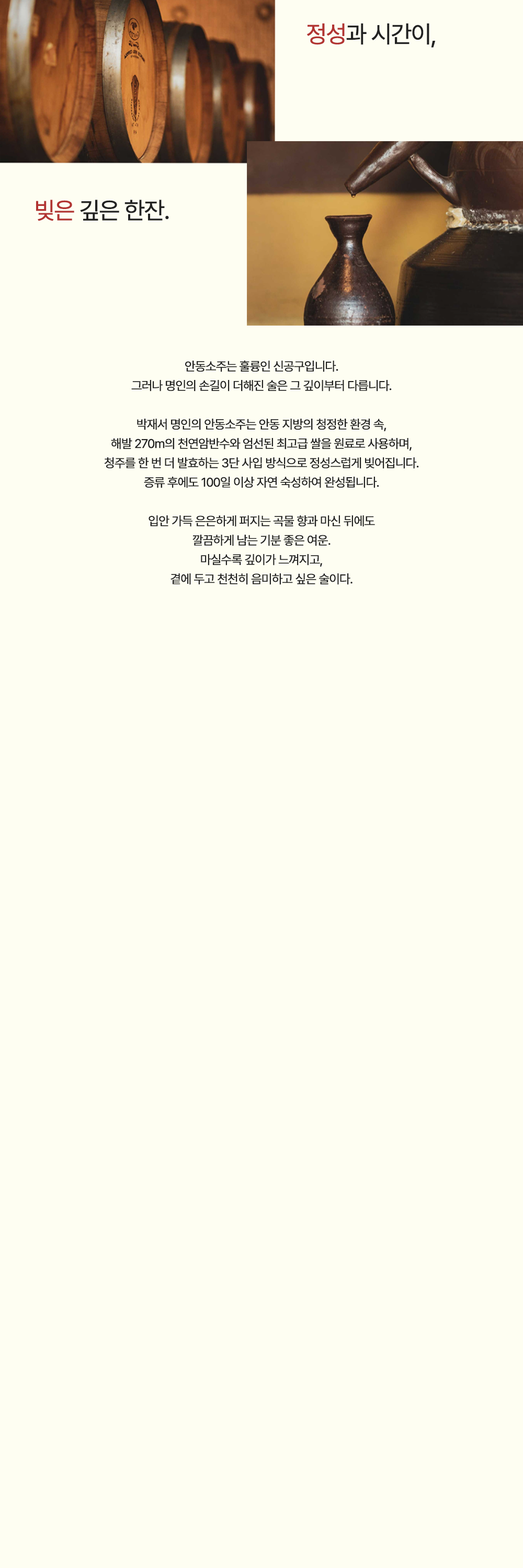
<style>
.page{position:relative;width:523px;height:1568px;background:#fefef2}
.page>*{position:absolute;margin:0}
.t1{font:24px "Pretendard-Regular";letter-spacing:-0.05em;color:#222222;font-weight:bold}
.t2{font:24px "Pretendard-Regular";letter-spacing:-0.05em;color:#b23432;font-weight:bold}
.t3{font:12.5px/19.3px "Pretendard-Regular";letter-spacing:-0.05em;color:#222222;font-weight:bold}
</style>
<div class="page">
<p class="t1" style="left:307px;top:23px;width:128px;height:25px"><span class="t2">정성</span>과 시간이,</p>
<p class="t1" style="left:36px;top:200px;width:133px;height:21px"><span class="t2">빚은</span> 깊은 한잔.</p>
<p class="t3" style="left:104px;top:360px;width:315px;height:225px;text-align:center">안동소주는 훌륭인 신공구입니다.<br>그러나 명인의 손길이 더해진 술은 그 깊이부터 다릅니다.<br><br>박재서 명인의 안동소주는 안동 지방의 청정한 환경 속,<br>해발 270m의 천연암반수와 엄선된 최고급 쌀을 원료로 사용하며,<br>청주를 한 번 더 발효하는 3단 사입 방식으로 정성스럽게 빚어집니다.<br>증류 후에도 100일 이상 자연 숙성하여 완성됩니다.<br><br>입안 가득 은은하게 퍼지는 곡물 향과 마신 뒤에도<br>깔끔하게 남는 기분 좋은 여운.<br>마실수록 깊이가 느껴지고,<br>곁에 두고 천천히 음미하고 싶은 술이다.</p>
</div>
